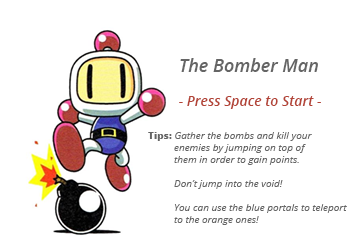
<style>
.page{position:relative;width:356px;height:240px;background:#ffffff}
.page>*{position:absolute;margin:0}
.t1{font:18px "OpenSans-SemiboldItalic";color:#656565}
.t2{font:14px "OpenSans-SemiboldItalic";color:#b34336}
.t3{font:10px "OpenSans-Italic";color:#656565}
.t4{font:10px "OpenSans-Extrabold";color:#656565}
</style>
<div class="page">
<p class="t1" style="left:180px;top:58px;width:138px;height:14px">The Bomber Man</p>
<p class="t2" style="left:179px;top:96px;width:142px;height:13px">- Press Space to Start -</p>
<p class="t3" style="left:148px;top:132px;width:199px;height:93px"><span class="t4">Tips: </span>Gather the bombs and kill your  <br>          enemies by jumping on top of  <br>          them in order to gain points.<br><br>          Don’t jump into the void!<br><br>          You can use the blue portals to teleport<br>          to the orange ones!</p>
</div>
